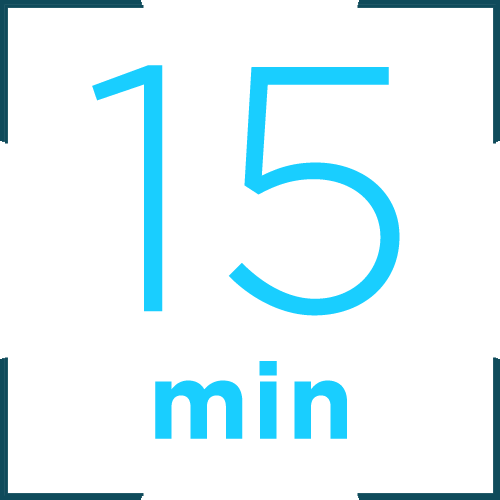
<style>
.page{position:relative;width:500px;height:500px;background:#ffffff}
.page>*{position:absolute;margin:0}
.t1{font:106.3px "Gotham-Bold";letter-spacing:0.03em;color:#19ceff}
.t2{font:348.5px "Gotham-Light";letter-spacing:0.03em;color:#19ceff}
</style>
<div class="page">
<p class="t1" style="left:92px;top:65px;width:308px;height:374px;text-align:center"><span class="t2">15<br></span>min</p>
</div>
